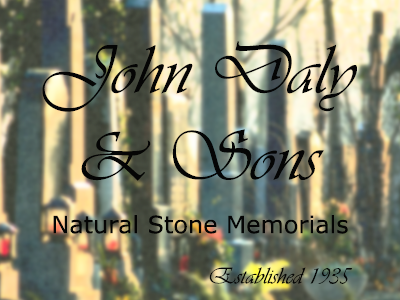
<style>
.page{position:relative;width:400px;height:300px}
.page>*{position:absolute;margin:0}
.t1{font:72px "Vivaldii";color:#030303}
.t2{font:24px "Verdana";color:#030303}
.t3{font:24px "Vivaldii";color:#040404}
</style>
<div class="page">
<p class="t1" style="left:42px;top:41px;width:315px;height:140px;text-align:center">John Daly &amp; Sons</p>
<p class="t2" style="left:53px;top:215px;width:295px;height:19px">Natural Stone Memorials</p>
<p class="t3" style="left:209px;top:267px;width:144px;height:17px">Established 1935</p>
</div>
